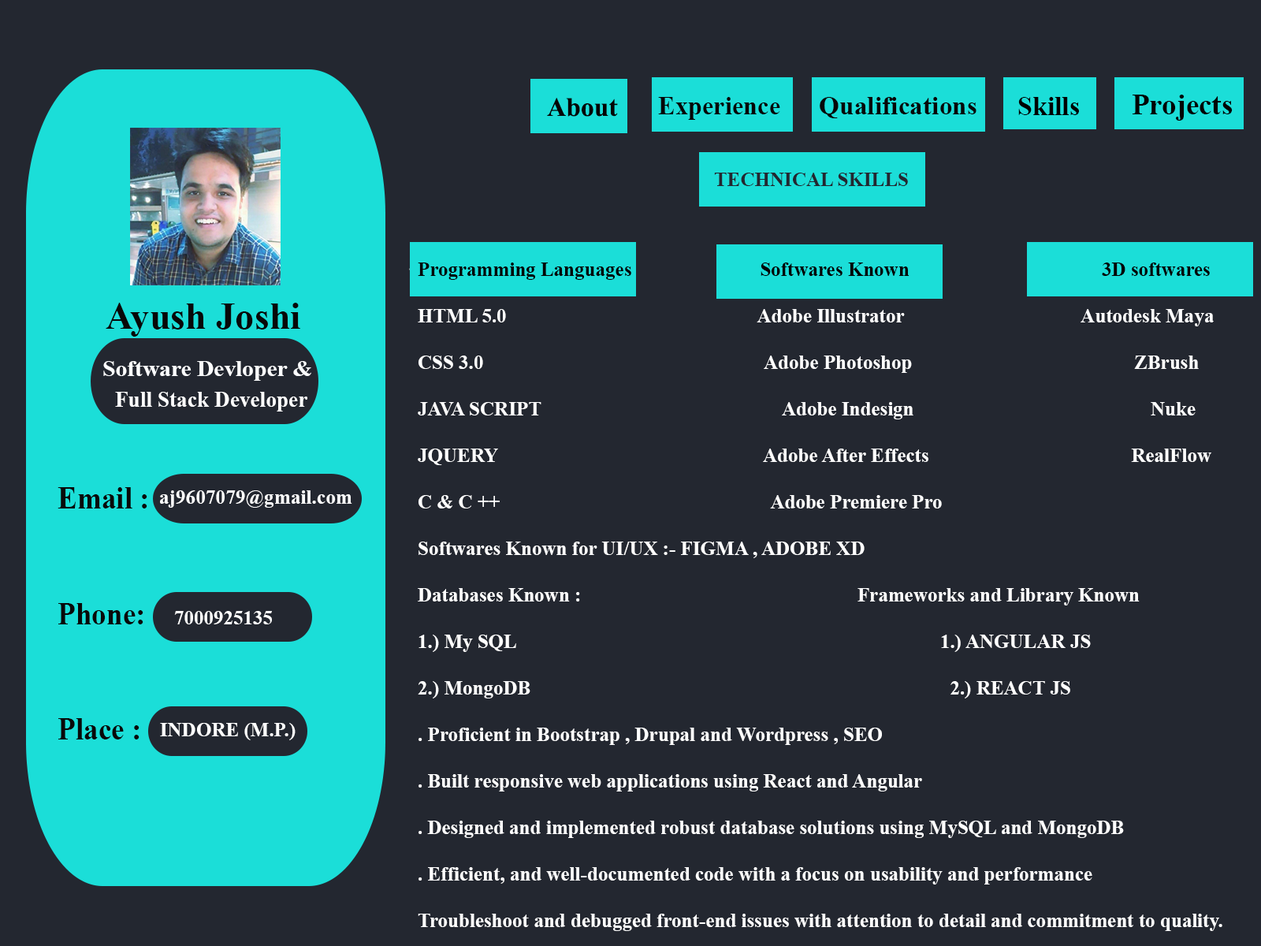
<style>
.page{position:relative;width:1261px;height:946px;background:#232730}
.page>*{position:absolute;margin:0}
.t1{font:26.5px "TimesNewRomanPS-BoldMT";color:#050505}
.t2{font:25.8px "TimesNewRomanPS-BoldMT";color:#060606}
.t3{font:25.8px "TimesNewRomanPS-BoldMT";color:#070707}
.t4{font:26.5px "TimesNewRomanPS-BoldMT";color:#010101}
.t5{font:29.2px "TimesNewRomanPS-BoldMT";color:#030303}
.t6{font:19.7px "TimesNewRomanPS-BoldMT";color:#232730}
.t7{font:29.4px "TimesNewRomanPS-BoldMT";color:#1bded8}
.t8{font:19.4px "TimesNewRomanPS-BoldMT";color:#ffffff}
.t9{font:19.4px "TimesNewRomanPS-BoldMT";color:#040404}
.t10{font:38.1px "TimesNewRomanPS-BoldMT";color:#080808}
.t11{font:23.1px "TimesNewRomanPS-BoldMT";color:#fcfdfe}
.t12{font:21.8px "TimesNewRomanPS-BoldMT";color:#ffffff}
.t13{font:31.7px "TimesNewRomanPS-BoldMT";color:#090909;scale:0.93 1}
.t14{font:19.7px "TimesNewRomanPS-BoldMT";color:#ffffff}
</style>
<div class="page">
<p class="t1" style="left:547px;top:98px;width:71px;height:19px">About</p>
<p class="t2" style="left:658px;top:97px;width:122px;height:23px">Experience</p>
<p class="t3" style="left:820px;top:97px;width:156px;height:21px">Qualifications</p>
<p class="t4" style="left:1018px;top:97px;width:61px;height:18px">Skills</p>
<p class="t5" style="left:1132px;top:95px;width:101px;height:26px">Projects</p>
<p class="t6" style="left:714px;top:173px;width:194px;height:13px">TECHNICAL SKILLS</p>
<p class="t7" style="left:409px;top:267px;width:6px;height:4px">.</p>
<p class="t8" style="left:418px;top:262px;width:804px;height:669px"><span class="t9">Programming Languages                          Softwares Known                                       3D softwares<br></span>HTML 5.0                                                   Adobe Illustrator                                    Autodesk Maya<br>CSS 3.0                                                         Adobe Photoshop                                             ZBrush<br>JAVA SCRIPT                                                 Adobe Indesign                                                Nuke<br>JQUERY                                                      Adobe After Effects                                         RealFlow<br>C &amp; C ++                                                       Adobe Premiere Pro<br>Softwares Known for UI/UX :- FIGMA , ADOBE XD<br>Databases Known :                                                        Frameworks and Library Known<br>1.) My SQL                                                                                      1.) ANGULAR JS<br>2.) MongoDB                                                                                     2.) REACT JS<br>. Proficient in Bootstrap , Drupal and Wordpress , SEO<br>. Built responsive web applications using React and Angular<br>. Designed and implemented robust database solutions using MySQL and MongoDB<br>. Efficient, and well-documented code with a focus on usability and performance<br>Troubleshoot and debugged front-end issues with attention to detail and commitment to quality.</p>
<p class="t10" style="left:106px;top:303px;width:194px;height:34px">Ayush Joshi</p>
<p class="t11" style="left:103px;top:361px;width:208px;height:20px">Software Devloper &amp;</p>
<p class="t12" style="left:115px;top:392px;width:192px;height:19px">Full Stack Developer</p>
<p class="t13" style="left:58px;top:487px;width:89px;height:252px">Email : <br><br>Phone:<br><br>Place :</p>
<p class="t14" style="left:160px;top:490px;width:192px;height:18px">aj9607079@gmail.com</p>
<p class="t14" style="left:174px;top:611px;width:98px;height:13px">7000925135</p>
<p class="t14" style="left:160px;top:723px;width:136px;height:17px">INDORE (M.P.)</p>
</div>
